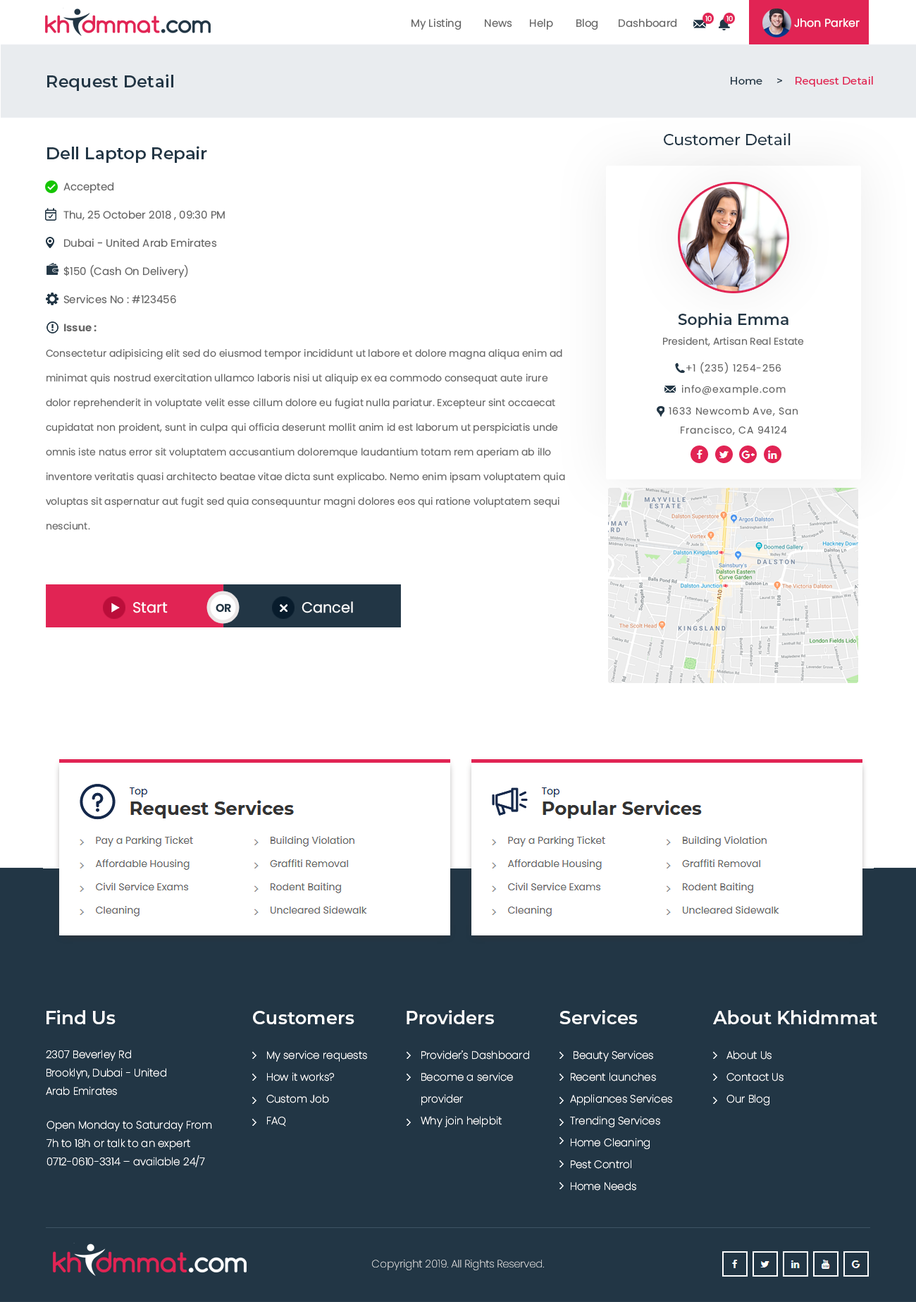
<style>
.page{position:relative;width:916px;height:1302px;background:#ffffff}
.page>*{position:absolute;margin:0}
.t1{font:7px "Poppins-Regular";color:#ffffff}
.t2{font:10.6px "Poppins-Regular";color:#666666}
.t3{font:9.9px "Poppins-Regular";color:#666666}
.t4{font:11.3px "Poppins-Regular";color:#ffffff}
.t5{font:16.9px "Montserrat-SemiBold";color:#223645}
.t6{font:10.6px "Montserrat-Medium";color:#e12454}
.t7{font:10.6px "Montserrat-Medium";color:#05315e}
.t8{font:10.6px "Montserrat-Medium";color:#223645}
.t9{font:15.5px "Montserrat-Medium";color:#223645}
.t10{font:10.6px/28.2px "Poppins-Regular";color:#666666}
.t11{font:10.6px/28.2px "Poppins-Bold";color:#666666}
.t12{font:9.9px/9.9px "Poppins-Regular";color:#666666}
.t13{font:15.5px/9.9px "Montserrat-SemiBold";color:#223645}
.t14{font:9.9px/24.7px "Poppins-Regular";color:#666666}
.t15{font:9.9px/21.1px "Poppins-Regular";letter-spacing:0.06em;color:#666666}
.t16{font:9.9px/21.8px "Poppins-Regular";letter-spacing:0.06em;color:#666666}
.t17{font:9.9px/19px "Poppins-Regular";letter-spacing:0.06em;color:#666666}
.t18{font:14.8px "Poppins-Regular";color:#ffffff}
.t19{font:11.3px "Poppins-Bold";color:#223645}
.t20{font:18.3px "Montserrat-SemiBold";color:#ffffff}
.t21{font:10.6px/18.3px "Poppins-ExtraLight";color:#ffffff}
.t22{font:10.6px/21.8px "Poppins-ExtraLight";color:#ffffff}
.t23{font:10.6px "Poppins-ExtraLight"}
</style>
<div class="page">
<p class="t1" style="left:705px;top:16px;width:7px;height:6px">10</p>
<p class="t1" style="left:727px;top:16px;width:6px;height:6px">10</p>
<p class="t2" style="left:412px;top:18px;width:448px;height:12px"><span class="t3">       </span>         My Listing        News      Help        Blog       Dashboard                                          <span class="t4">Jhon Parker</span></p>
<p class="t5" style="left:47px;top:74px;width:126px;height:17px">Request Detail</p>
<p class="t6" style="left:731px;top:76px;width:142px;height:11px"><span class="t7">    </span><span class="t8">Home     &gt;    </span>Request Detail</p>
<p class="t9" style="left:664px;top:133px;width:127px;height:12px">Customer Detail</p>
<p class="t5" style="left:47px;top:146px;width:160px;height:17px">Dell Laptop Repair</p>
<p class="t10" style="left:63px;top:182px;width:162px;height:149px">Accepted          <br>Thu, 25 October 2018 , 09:30 PM         <br>Dubai - United Arab Emirates           <br>$150 (Cash On Delivery)<br>Services No : #123456<br><span class="t11">Issue :</span></p>
<p class="t12" style="left:663px;top:313px;width:141px;height:34px;text-align:center"><span class="t13">Sophia Emma<br><br></span>President, Artisan Real Estate</p>
<p class="t14" style="left:46px;top:349px;width:519px;height:181px">Consectetur adipisicing elit sed do eiusmod tempor incididunt ut labore et dolore magna aliqua enim ad minimat quis nostrud exercitation ullamco laboris nisi ut aliquip ex ea commodo consequat aute irure dolor reprehenderit in voluptate velit esse cillum dolore eu fugiat nulla pariatur. Excepteur sint occaecat cupidatat non proident, sunt in culpa qui officia deserunt mollit anim id est laborum ut perspiciatis unde omnis iste natus error sit voluptatem accusantium doloremque laudantium totam rem aperiam ab illo inventore veritatis quasi architecto beatae vitae dicta sunt explicabo. Nemo enim ipsam voluptatem quia voluptas sit aspernatur aut fugit sed quia consequuntur magni dolores eos qui ratione voluptatem sequi nesciunt.</p>
<p class="t15" style="left:669px;top:362px;width:129px;height:74px;text-align:center">+1 (235) 1254-256<br>info@example.com<br><span class="t16">1633 Newcomb Ave, San <br></span><span class="t17">Francisco, CA 94124</span></p>
<p class="t18" style="left:133px;top:602px;width:35px;height:11px">Start</p>
<p class="t19" style="left:216px;top:603px;width:15px;height:9px">OR</p>
<p class="t18" style="left:302px;top:601px;width:51px;height:12px">Cancel</p>
<p class="t20" style="left:47px;top:1010px;width:69px;height:14px">Find Us</p>
<p class="t20" style="left:253px;top:1011px;width:101px;height:13px">Customers</p>
<p class="t20" style="left:407px;top:1010px;width:87px;height:14px">Providers</p>
<p class="t20" style="left:560px;top:1010px;width:78px;height:14px">Services</p>
<p class="t20" style="left:713px;top:1010px;width:164px;height:14px">About Khidmmat</p>
<p class="t21" style="left:46px;top:1049px;width:120px;height:46px">2307 Beverley Rd<br>Brooklyn, Dubai - United Arab Emirates</p>
<p class="t22" style="left:266px;top:1050px;width:101px;height:76px">My service requests<br>    How it works?<br>    Custom Job<br>    FAQ</p>
<p class="t22" style="left:421px;top:1050px;width:108px;height:77px">Provider's Dashboard<br>    Become a service <br>    provider<br>    Why join helpbit</p>
<p class="t22" style="left:570px;top:1050px;width:102px;height:140px">Beauty Services <br>Recent launches <br>Appliances Services Trending Services <br>Home Cleaning <br>Pest Control <br>Home Needs</p>
<p class="t22" style="left:727px;top:1050px;width:57px;height:56px">About Us<br> Contact Us<br> Our Blog</p>
<p class="t21" style="left:47px;top:1120px;width:165px;height:47px">Open Monday to Saturday From 7h to 18h or talk to an expert 0712-0610-3314 – available 24/7</p>
<p class="t23" style="left:372px;top:1259px;width:172px;height:11px">Copyright 2019. All Rights Reserved.</p>
</div>
